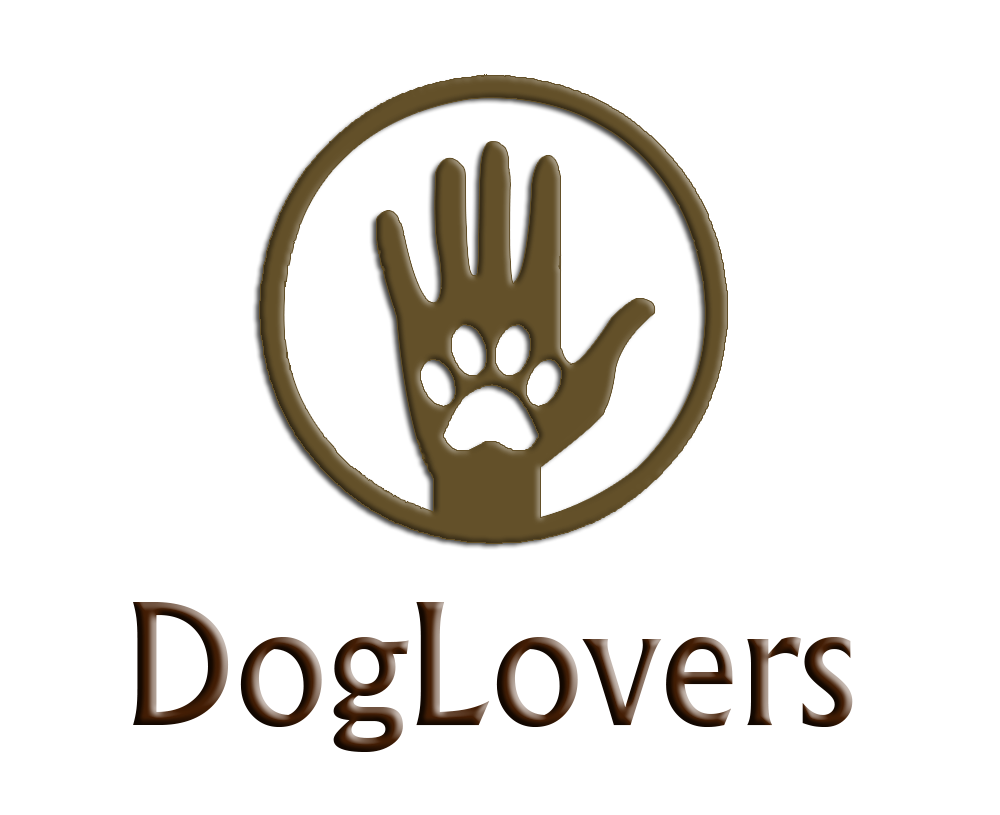
<style>
.page{position:relative;width:1000px;height:815px;background:#ffffff}
.page>*{position:absolute;margin:0}
.t1{font:160.5px "AlbertusMedium-Regular"}
</style>
<div class="page">
<p class="t1" style="left:133px;top:602px;width:720px;height:150px">DogLovers</p>
</div>
